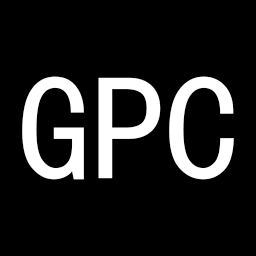
<style>
.page{position:relative;width:256px;height:256px;background:#000000}
.page>*{position:absolute;margin:0}
.t1{font:150px "SimHei";letter-spacing:-0.009em;color:#ffffff}
</style>
<div class="page">
<p class="t1" style="left:22px;top:76px;width:212px;height:104px">GPC</p>
</div>
